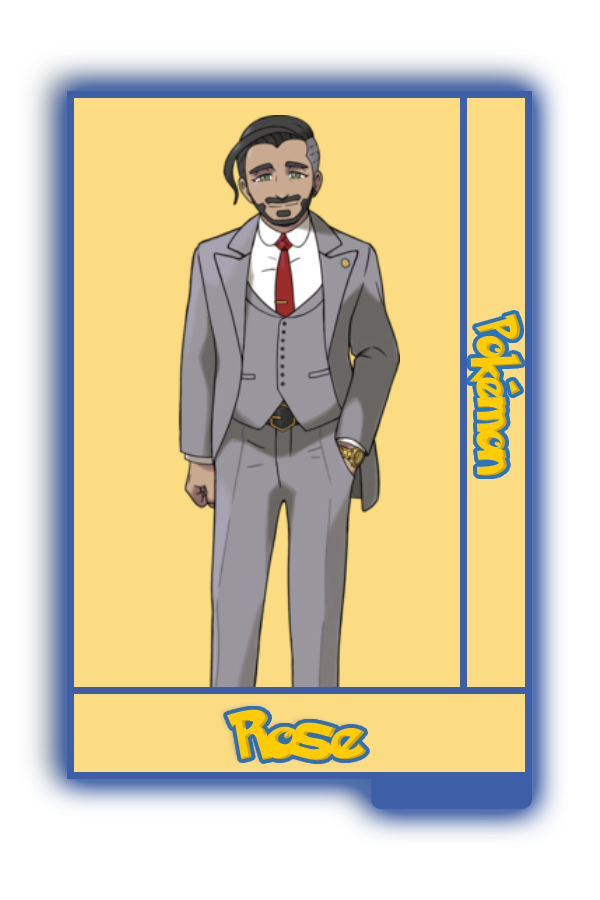
<style>
.page{position:relative;width:600px;height:900px;background:#fbdc83}
.page>*{position:absolute;margin:0}
.t1{font:48.8px "PokemonSolidNormal";color:#ffcb05;scale:0.8 1}
.t2{font:55.2px "PokemonSolidNormal";color:#ffcb05;scale:1.12 1}
</style>
<div class="page">
<p class="t1" style="left:469px;top:313px;width:54px;height:163px;rotate:90deg">Pokémon</p>
<p class="t2" style="left:227px;top:709px;width:140px;height:52px">Rose</p>
</div>
